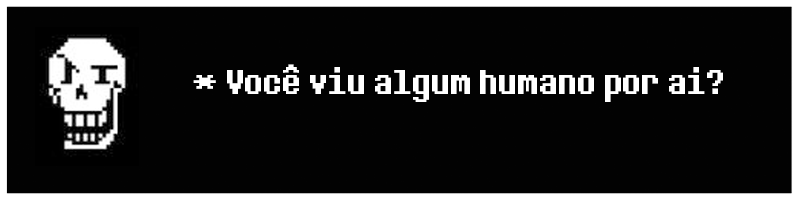
<style>
.page{position:relative;width:800px;height:200px;background:#020202}
.page>*{position:absolute;margin:0}
.t1{font:36px "DeterminationSans";color:#ffffff}
</style>
<div class="page">
<p class="t1" style="left:193px;top:64px;width:530px;height:38px">* Você viu algum humano por ai?</p>
</div>
